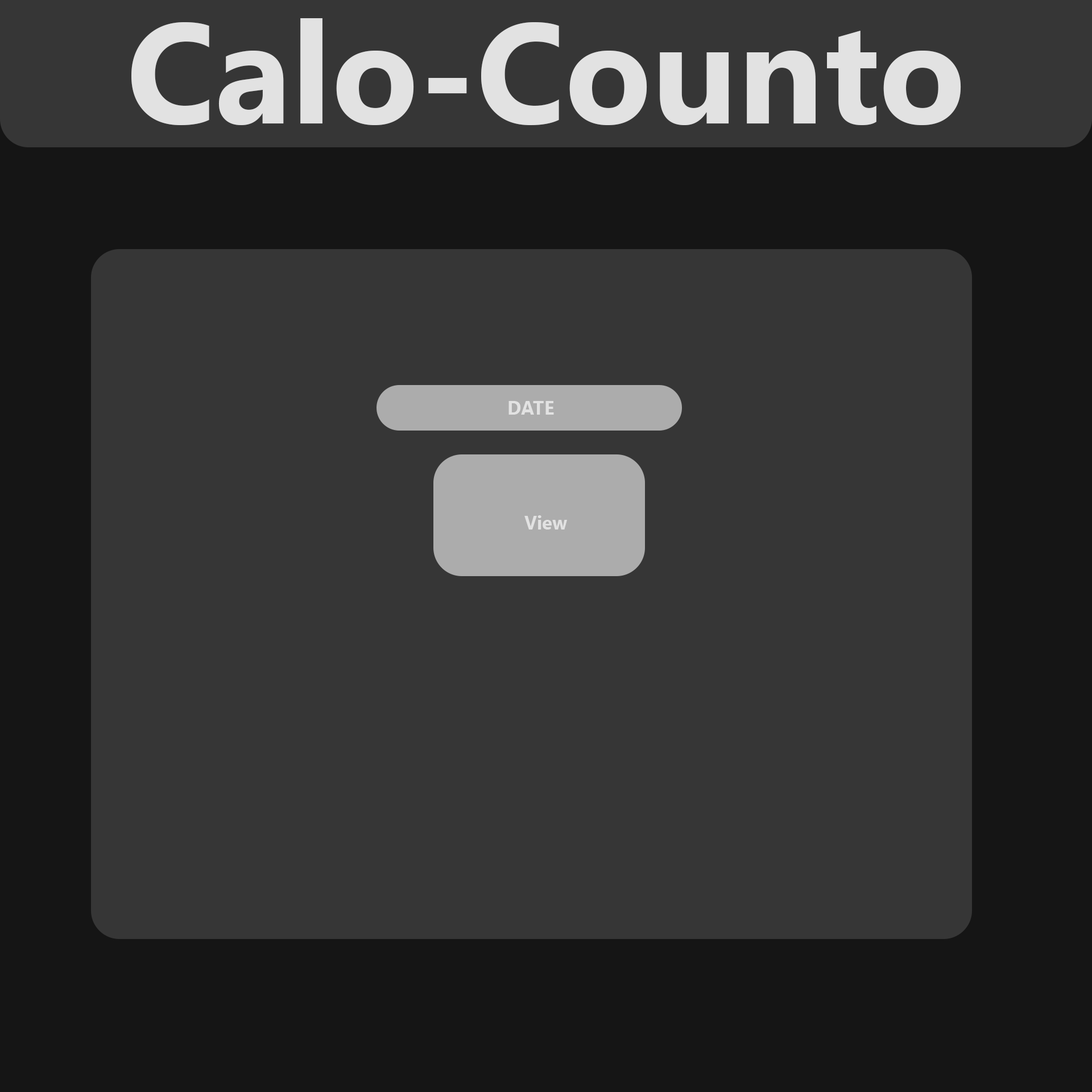
<style>
.page{position:relative;width:1092px;height:1092px;background:#363636}
.page>*{position:absolute;margin:0}
.t1{font:142.2px "SegoeUI-Bold";color:#e2e2e2}
.t2{font:19px "SegoeUI-Bold";color:#e2e2e2}
</style>
<div class="page">
<p class="t1" style="left:131px;top:18px;width:830px;height:107px">Calo-Counto</p>
<p class="t2" style="left:508px;top:401px;width:46px;height:14px">DATE</p>
<p class="t2" style="left:524px;top:515px;width:43px;height:14px">View</p>
</div>
